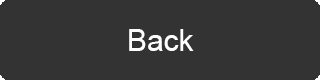
<style>
.page{position:relative;width:320px;height:80px;background:#333333}
.page>*{position:absolute;margin:0}
.t1{font:30px "ArialMT";color:#ffffff}
</style>
<div class="page">
<p class="t1" style="left:129px;top:29px;width:65px;height:22px">Back</p>
</div>
